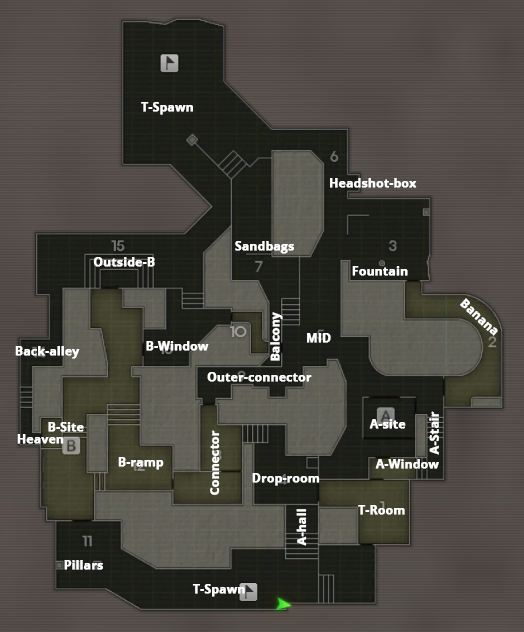
<style>
.page{position:relative;width:524px;height:632px}
.page>*{position:absolute;margin:0}
.t1{font:12px "OpenSans-Bold";color:#ffffff;font-weight:bold}
.t2{font:12.2px "OpenSans-Bold";color:#ffffff;font-weight:bold}
</style>
<div class="page">
<p class="t1" style="left:141px;top:102px;width:52px;height:13px">T-Spawn</p>
<p class="t1" style="left:330px;top:178px;width:87px;height:10px">Headshot-box</p>
<p class="t1" style="left:235px;top:241px;width:59px;height:13px">Sandbags</p>
<p class="t1" style="left:93px;top:257px;width:62px;height:10px">Outside-B</p>
<p class="t1" style="left:352px;top:266px;width:56px;height:10px">Fountain</p>
<p class="t1" style="left:460px;top:298px;width:38px;height:38px;rotate:42deg">Banana</p>
<p class="t1" style="left:270px;top:312px;width:13px;height:49px;rotate:-90deg">Balcony</p>
<p class="t1" style="left:146px;top:341px;width:63px;height:10px">B-Window</p>
<p class="t1" style="left:307px;top:333px;width:24px;height:10px">MID</p>
<p class="t1" style="left:15px;top:346px;width:65px;height:13px">Back-alley</p>
<p class="t1" style="left:207px;top:372px;width:105px;height:10px">Outer-connector</p>
<p class="t2" style="left:429px;top:411px;width:10px;height:44px;rotate:-90deg">A-Stair</p>
<p class="t1" style="left:48px;top:422px;width:36px;height:10px">B-Site</p>
<p class="t1" style="left:369px;top:419px;width:37px;height:10px">A-site</p>
<p class="t1" style="left:17px;top:434px;width:47px;height:10px">Heaven</p>
<p class="t1" style="left:210px;top:430px;width:10px;height:65px;rotate:-90deg">Connector</p>
<p class="t1" style="left:118px;top:457px;width:46px;height:13px">B-ramp</p>
<p class="t1" style="left:375px;top:459px;width:64px;height:10px">A-Window</p>
<p class="t1" style="left:252px;top:473px;width:68px;height:13px">Drop-room</p>
<p class="t1" style="left:296px;top:509px;width:11px;height:37px;rotate:-90deg">A-hall</p>
<p class="t1" style="left:358px;top:505px;width:47px;height:10px">T-Room</p>
<p class="t1" style="left:64px;top:560px;width:39px;height:10px">Pillars</p>
<p class="t1" style="left:192px;top:584px;width:53px;height:13px">T-Spawn</p>
</div>
